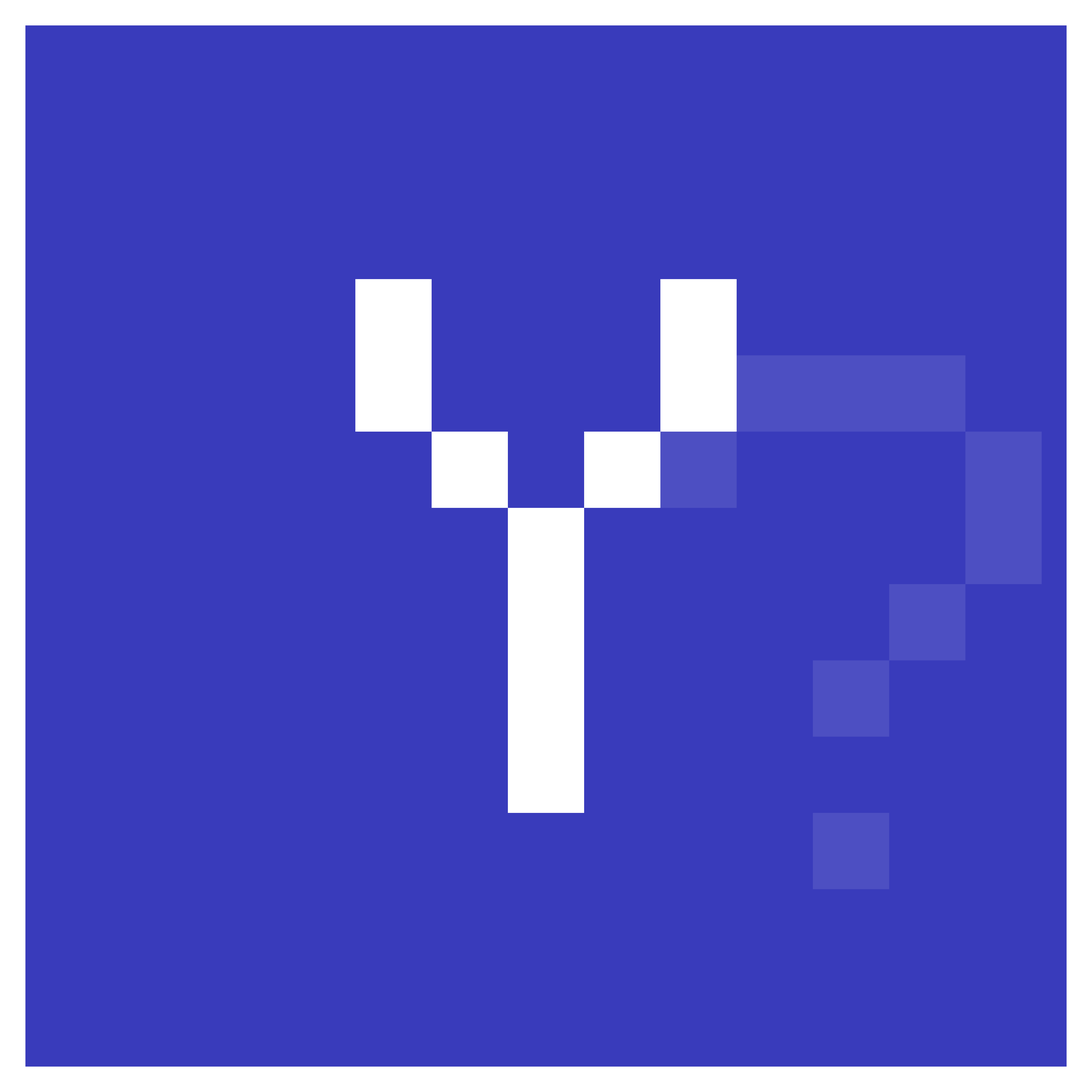
<style>
.page{position:relative;width:1092px;height:1092px;background:#393bbb}
.page>*{position:absolute;margin:0}
.t1{font:762.6px "Yapix";color:#ffffff}
</style>
<div class="page">
<p class="t1" style="left:355px;top:279px;width:382px;height:534px">Y</p>
</div>
